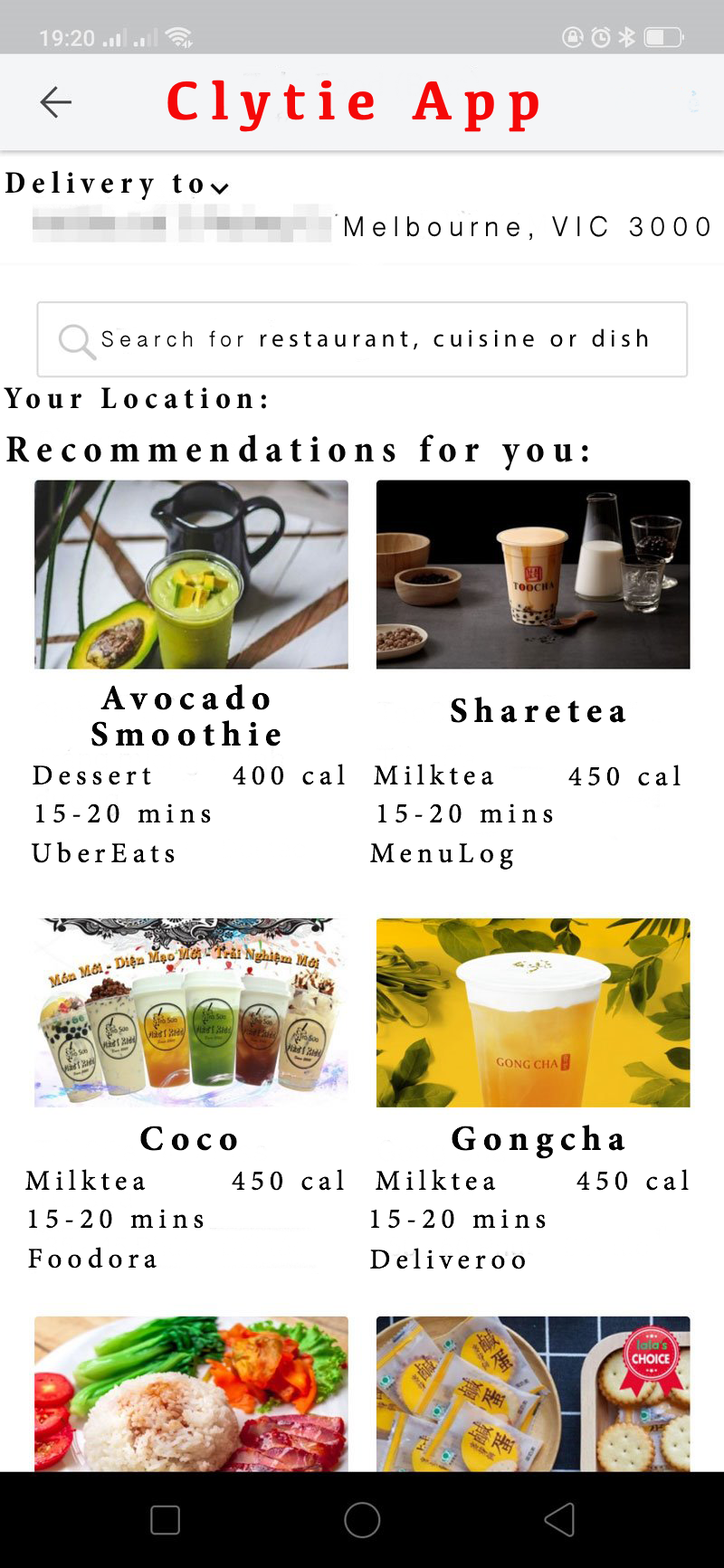
<style>
.page{position:relative;width:724px;height:1568px;background:#ffffff}
.page>*{position:absolute;margin:0}
.t1{font:96.5px "Kefa-Bold";letter-spacing:0.2em;color:#f40808}
.t2{font:54.3px "MinionPro-BoldCn";letter-spacing:0.2em;color:#050505}
.t3{font:54.3px "OriyaSangamMN";letter-spacing:0.2em;color:#050505}
.t4{font:42.2px "MyriadPro-Regular";letter-spacing:0.2em;color:#050505}
.t5{font:42.2px "OriyaSangamMN";letter-spacing:0.2em;color:#050505}
.t6{font:66.4px "MinionPro-BoldCn";letter-spacing:0.2em;color:#050505}
.t7{font:60.3px/36.2px "MinionPro-Bold";letter-spacing:0.2em;color:#030303}
.t8{font:60.3px "MinionPro-Bold";letter-spacing:0.2em;color:#030303}
.t9{font:48.3px "MinionPro-Regular";letter-spacing:0.2em;color:#030303}
</style>
<div class="page">
<p class="t1" style="left:167px;top:80px;width:371px;height:52px">Clytie App</p>
<p class="t2" style="left:5px;top:170px;width:198px;height:31px">Delivery to</p>
<p class="t3" style="left:345px;top:215px;width:364px;height:26px">Melbourne, VIC 3000</p>
<p class="t4" style="left:101px;top:328px;width:547px;height:22px"><span class="t5">Search for </span>restaurant, cuisine or dish</p>
<p class="t2" style="left:4px;top:387px;width:262px;height:22px">Your Location:</p>
<p class="t6" style="left:6px;top:434px;width:582px;height:36px">Recommendations for you:</p>
<p class="t7" style="left:91px;top:684px;width:189px;height:62px;text-align:center">Avocado<br>Smoothie</p>
<p class="t8" style="left:451px;top:697px;width:175px;height:26px">Sharetea</p>
<p class="t9" style="left:33px;top:765px;width:118px;height:20px">Dessert</p>
<p class="t9" style="left:233px;top:764px;width:112px;height:21px">400 cal</p>
<p class="t9" style="left:374px;top:764px;width:120px;height:21px">Milktea</p>
<p class="t9" style="left:568px;top:765px;width:112px;height:21px">450 cal</p>
<p class="t9" style="left:36px;top:803px;width:175px;height:20px">15-20 mins</p>
<p class="t9" style="left:378px;top:803px;width:175px;height:20px">15-20 mins</p>
<p class="t9" style="left:31px;top:841px;width:144px;height:22px">UberEats</p>
<p class="t9" style="left:370px;top:843px;width:143px;height:27px">MenuLog</p>
<p class="t8" style="left:140px;top:1126px;width:97px;height:25px">Coco</p>
<p class="t8" style="left:451px;top:1125px;width:174px;height:34px">Gongcha</p>
<p class="t9" style="left:25px;top:1169px;width:121px;height:22px">Milktea</p>
<p class="t9" style="left:232px;top:1169px;width:112px;height:22px">450 cal</p>
<p class="t9" style="left:375px;top:1169px;width:121px;height:22px">Milktea</p>
<p class="t9" style="left:576px;top:1169px;width:113px;height:22px">450 cal</p>
<p class="t9" style="left:29px;top:1209px;width:175px;height:20px">15-20 mins</p>
<p class="t9" style="left:371px;top:1209px;width:175px;height:20px">15-20 mins</p>
<p class="t9" style="left:28px;top:1247px;width:129px;height:22px">Foodora</p>
<p class="t9" style="left:370px;top:1248px;width:156px;height:21px">Deliveroo</p>
</div>
